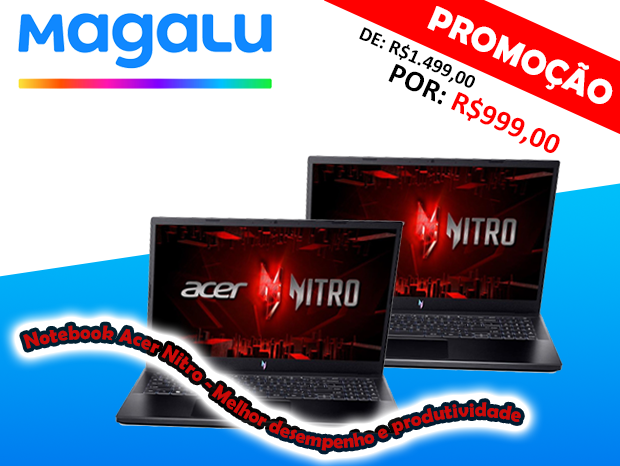
<style>
.page{position:relative;width:620px;height:466px;background:#ffffff}
.page>*{position:absolute;margin:0}
.t1{font:35px "BerlinSansFBDemi-Bold";color:#ffffff}
.t2{font:20px "Calibri-Bold";color:#000000}
.t3{font:30px "Calibri-Bold";color:#ff0000}
.t4{font:30px "Calibri-Bold";color:#000000}
.t5{font:20px "BerlinSansFBDemi-Bold";color:#cb0a08}
</style>
<div class="page">
<p class="t1" style="left:427px;top:6px;width:186px;height:98px;rotate:24deg">PROMOÇÃO</p>
<p class="t2" style="left:359px;top:27px;width:116px;height:61px;rotate:24deg">DE: R$1.499,00</p>
<p class="t3" style="left:388px;top:64px;width:172px;height:89px;rotate:24deg"><span class="t4">POR: </span>R$999,00</p>
<p class="t5" style="left:23px;top:325px;width:498px;height:126px">Notebook Acer Nitro - Melhor desempenho e produtividade</p>
</div>
